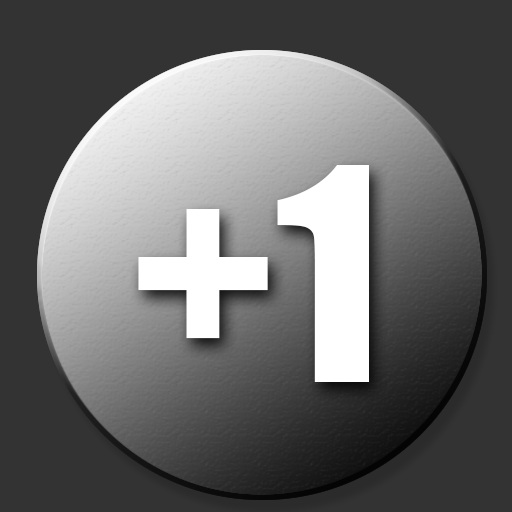
<style>
.page{position:relative;width:512px;height:512px;background:#333333}
.page>*{position:absolute;margin:0}
.t1{font:274px "Impact";color:#ffffff}
</style>
<div class="page">
<p class="t1" style="left:138px;top:165px;width:231px;height:217px">+1</p>
</div>
